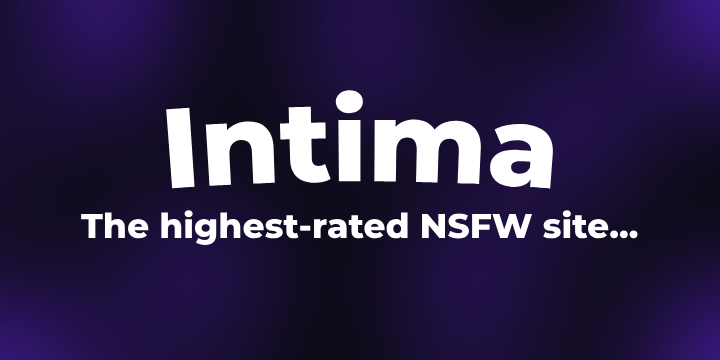
<style>
.page{position:relative;width:720px;height:360px}
.page>*{position:absolute;margin:0}
.t1{font:113.2px "Montserrat-ExtraBold";color:#ffffff}
.t2{font:34.4px "Montserrat-ExtraBold";color:#ffffff}
</style>
<div class="page">
<p class="t1" style="left:166px;top:90px;width:388px;height:99px">Intima</p>
<p class="t2" style="left:81px;top:210px;width:557px;height:35px">The highest-rated NSFW site...</p>
</div>
